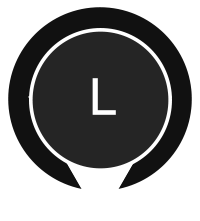
<style>
.page{position:relative;width:200px;height:221px;background:#ffffff}
.page>*{position:absolute;margin:0}
.t1{font:50.7px "ArialMT";color:#ffffff}
</style>
<div class="page">
<p class="t1" style="left:92px;top:78px;width:24px;height:37px">L</p>
</div>
